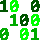
<style>
.page{position:relative;width:40px;height:40px;background:#ffffff}
.page>*{position:absolute;margin:0}
.t1{font:16.9px "Consolas";letter-spacing:0.005em;color:#005500;font-weight:bold}
.t2{font:16.9px "Consolas";letter-spacing:0.005em;color:#00ff00;font-weight:bold}
.t3{font:16.9px "Consolas";letter-spacing:0.005em;color:#00aa00;font-weight:bold}
</style>
<div class="page">
<p class="t1" style="left:0px;top:0px;width:8px;height:12px">1</p>
<p class="t2" style="left:10px;top:0px;width:9px;height:12px">0</p>
<p class="t1" style="left:31px;top:0px;width:9px;height:12px">0</p>
<p class="t3" style="left:10px;top:14px;width:8px;height:12px">1</p>
<p class="t1" style="left:20px;top:14px;width:9px;height:12px">0</p>
<p class="t2" style="left:31px;top:14px;width:9px;height:12px">0</p>
<p class="t3" style="left:0px;top:28px;width:9px;height:12px">0</p>
<p class="t2" style="left:20px;top:28px;width:9px;height:12px">0</p>
<p class="t3" style="left:31px;top:28px;width:8px;height:12px">1</p>
</div>
